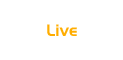
<style>
.page{position:relative;width:123px;height:60px;background:#ffffff}
.page>*{position:absolute;margin:0}
.t1{font:16px "AeroRegularSWFTE";color:#ffad00}
</style>
<div class="page">
<p class="t1" style="left:47px;top:24px;width:30px;height:12px">Live</p>
</div>
